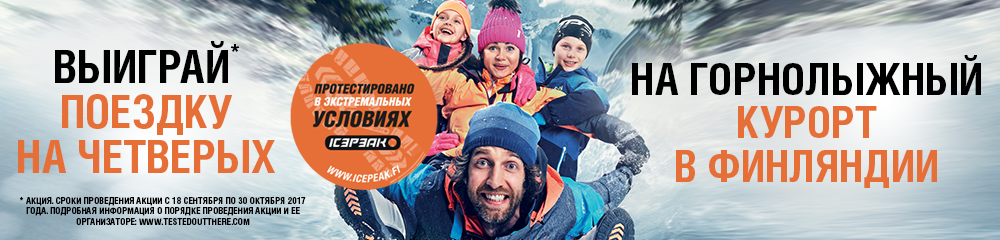
<style>
.page{position:relative;width:1000px;height:240px}
.page>*{position:absolute;margin:0}
.t1{font:45.2px/45.2px "HeliosCondC-Bold";color:#e66f37;text-transform:uppercase}
.t2{font:45.2px/27.3px "HeliosCondC-Bold";color:#000000;text-transform:uppercase}
.t3{font:25px/27.3px "HeliosCondC-Bold";color:#000000;text-transform:uppercase}
.t4{font:43.7px/43.7px "HeliosCondC-Bold";color:#e66f37;text-transform:uppercase}
.t5{font:43.7px/31.8px "HeliosCondC-Bold";color:#000000;text-transform:uppercase}
.t6{font:9.4px/10.4px "HeliosCondC-Bold";color:#010101;text-transform:uppercase}
</style>
<div class="page">
<p class="t1" style="left:18px;top:41px;width:257px;height:132px;text-align:center"><span class="t2">выиграй</span><span class="t3">*<br></span>поездку<br>на четверых</p>
<p class="t4" style="left:632px;top:55px;width:349px;height:133px;text-align:center"><span class="t5">на горнолыжный<br></span>курорт<br>в Финляндии</p>
<p class="t6" style="left:19px;top:197px;width:287px;height:28px;text-align:center">* Акция. Сроки проведения акции с 18 сентября по 30 октября 2017 года. Подробная информация о порядке проведения акции и ее организаторе: www.testedoutthere.com</p>
</div>
